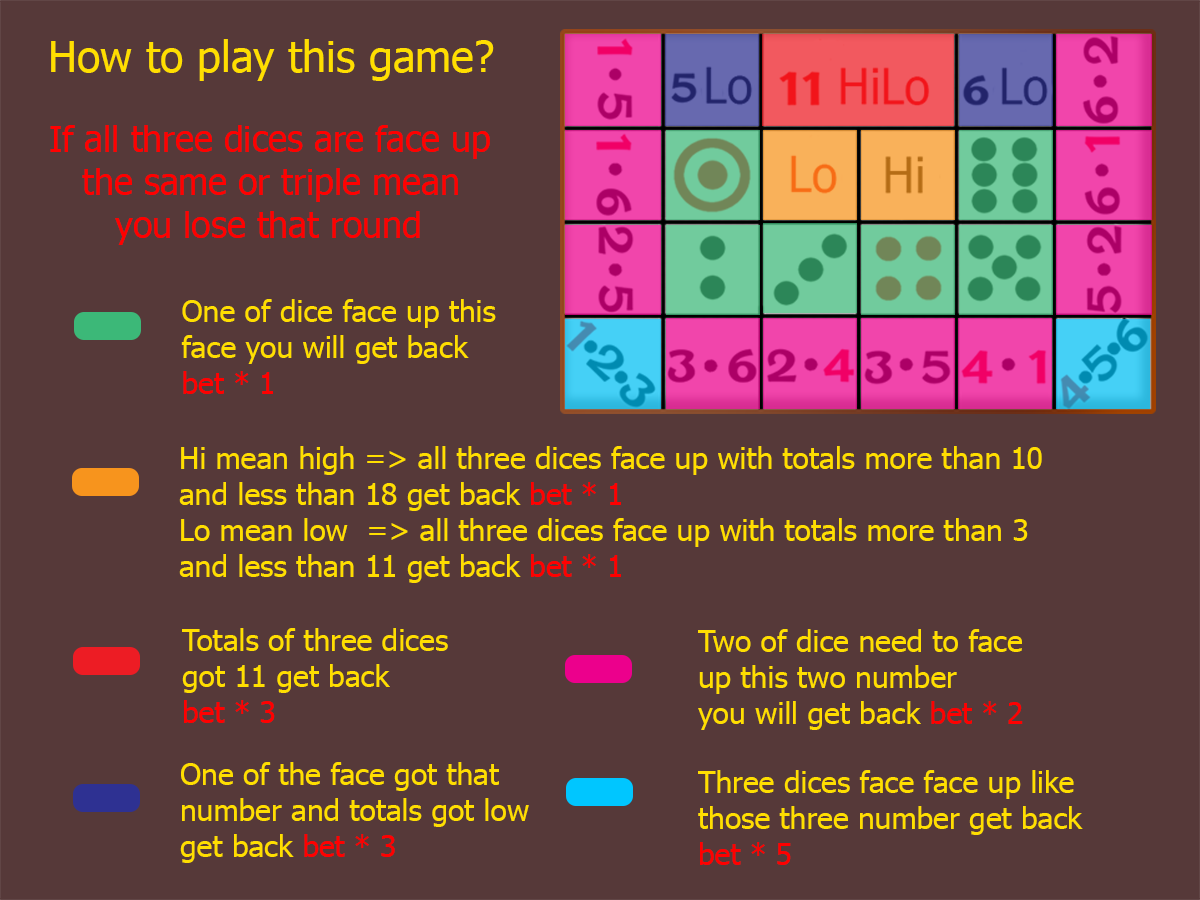
<style>
.page{position:relative;width:1200px;height:900px;background:#563939}
.page>*{position:absolute;margin:0}
.t1{font:43.1px "Tahoma";color:#ffde00}
.t2{font:35.7px "Tahoma";color:#ff0000}
.t3{font:30px "Tahoma";color:#ffde00}
.t4{font:30px "Tahoma";color:#ff0000}
</style>
<div class="page">
<p class="t1" style="left:51px;top:39px;width:443px;height:42px">How to play this game?</p>
<p class="t2" style="left:50px;top:125px;width:440px;height:120px">If all three dices are face up<br>   the same or triple mean<br>      you lose that round</p>
<p class="t3" style="left:181px;top:299px;width:315px;height:95px">One of dice face up this<br>face you will get back <br><span class="t4">bet * 1</span></p>
<p class="t3" style="left:179px;top:446px;width:863px;height:137px">Hi mean high =&gt; all three dices face up with totals more than 10<br>and less than 18 get back<span class="t4"> bet * 1<br></span>Lo mean low  =&gt; all three dices face up with totals more than 3<br>and less than 11 get back<span class="t4"> bet * 1</span></p>
<p class="t3" style="left:182px;top:628px;width:266px;height:95px">Totals of three dices <br>got 11 get back<br><span class="t4">bet * 3</span></p>
<p class="t3" style="left:698px;top:629px;width:325px;height:101px">Two of dice need to face <br>up this two number<br>you will get back <span class="t4">bet * 2</span></p>
<p class="t3" style="left:180px;top:762px;width:349px;height:101px">One of the face got that<br>number and totals got low<br>get back <span class="t4">bet * 3</span></p>
<p class="t3" style="left:698px;top:770px;width:385px;height:95px">Three dices face face up like <br>those three number get back<br><span class="t4">bet * 5</span></p>
</div>
